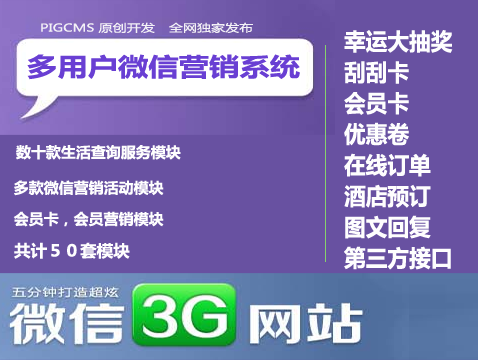
<style>
.page{position:relative;width:478px;height:360px;background:#6851a1}
.page>*{position:absolute;margin:0}
.t1{font:10.6px "MicrosoftYaHei";color:#f3f1f6;text-transform:uppercase;scale:1.33 1}
.t2{font:23.1px/31px "MicrosoftYaHei-Bold";color:#fefefe;text-transform:uppercase;scale:0.94 1}
.t3{font:24.9px "MicrosoftYaHei-Bold";color:#693fd3;text-transform:uppercase;scale:1.22 1}
.t4{font:14.7px "MicrosoftYaHei-Bold";color:#fefefe;text-transform:uppercase}
.t5{font:16.2px "MicrosoftYaHei-Bold";color:#fefefe;text-transform:uppercase}
</style>
<div class="page">
<p class="t1" style="left:41px;top:22px;width:212px;height:11px">PIGcms 原创开发　全网独家发布</p>
<p class="t2" style="left:344px;top:30px;width:109px;height:240px">幸运大抽奖<br>刮刮卡<br>会员卡<br>优惠卷<br>在线订单<br>酒店预订<br>图文回复<br>第三方接口</p>
<p class="t3" style="left:27px;top:54px;width:273px;height:26px">多用户微信营销系统</p>
<p class="t4" style="left:16px;top:145px;width:165px;height:15px">数十款生活查询服务模块</p>
<p class="t4" style="left:14px;top:180px;width:150px;height:16px">多款微信营销活动模块</p>
<p class="t4" style="left:13px;top:211px;width:151px;height:16px">会员卡，会员营销模块</p>
<p class="t5" style="left:14px;top:242px;width:116px;height:17px">共计５０套模块</p>
</div>
